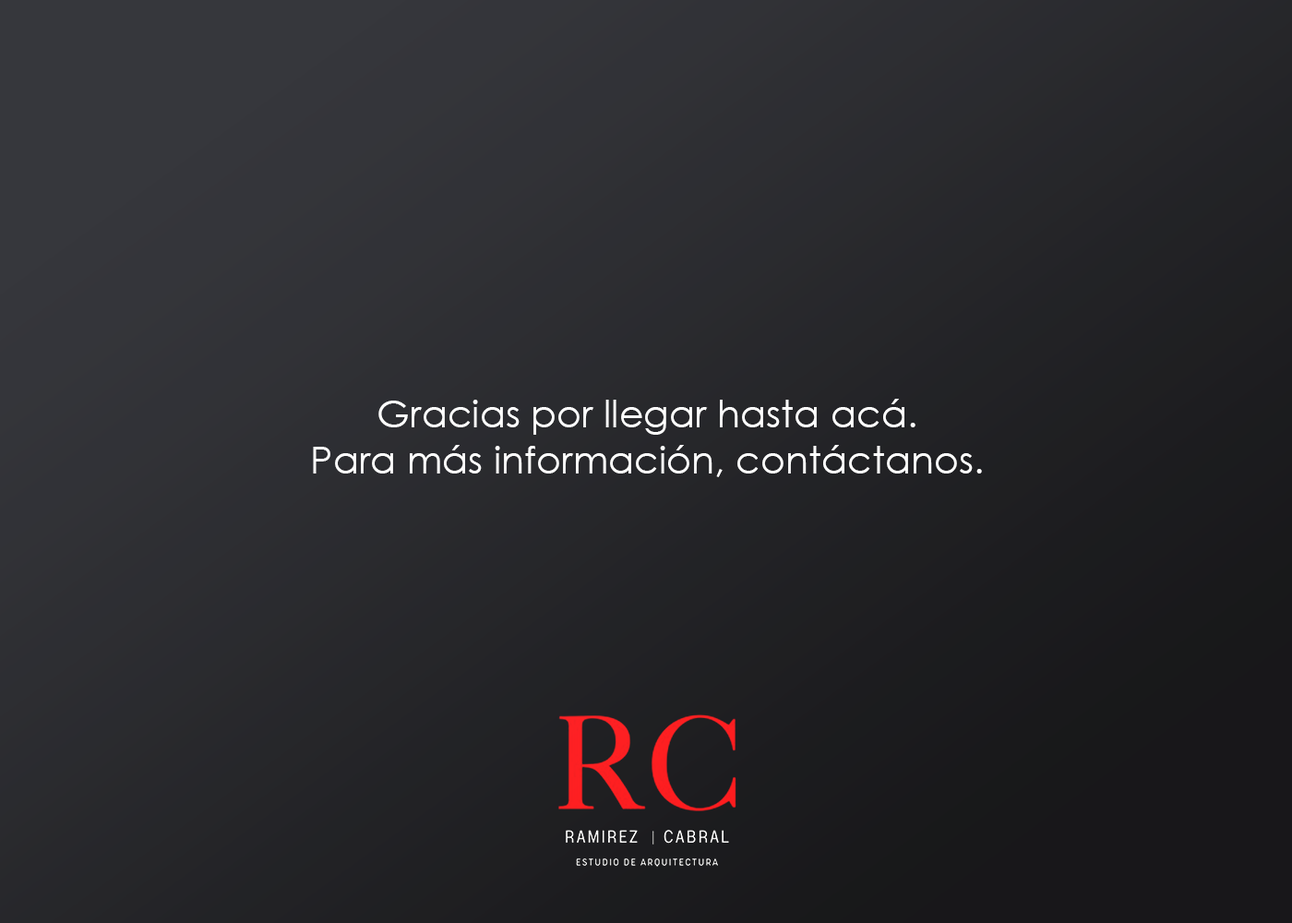
<style>
.page{position:relative;width:1292px;height:923px}
.page>*{position:absolute;margin:0}
.t1{font:38px "CenturyGothic";color:#ffffff}
</style>
<div class="page">
<p class="t1" style="left:313px;top:399px;width:669px;height:78px;text-align:center">Gracias por llegar hasta acá. <br>Para más información, contáctanos.</p>
</div>
